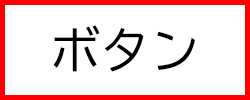
<style>
.page{position:relative;width:250px;height:100px;background:#ffffff}
.page>*{position:absolute;margin:0}
.t1{font:50px "BIZ-UDGothic";color:#000000}
</style>
<div class="page">
<p class="t1" style="left:53px;top:25px;width:142px;height:47px">ボタン</p>
</div>
